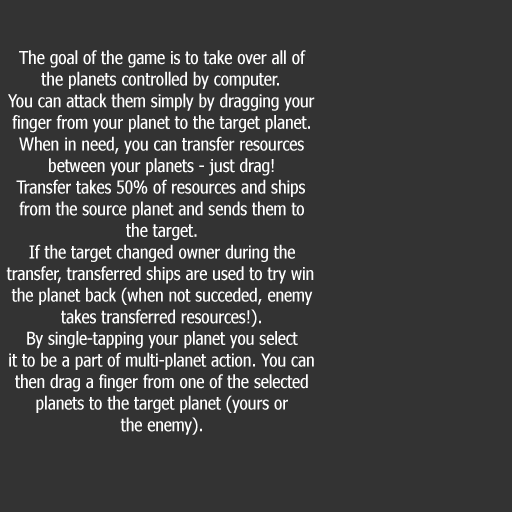
<style>
.page{position:relative;width:512px;height:512px;background:#333333}
.page>*{position:absolute;margin:0}
.t1{font:18px "Nina";color:#ffffff}
</style>
<div class="page">
<p class="t1" style="left:6px;top:50px;width:309px;height:385px;text-align:center">The goal of the game is to take over all of<br>the planets controlled by computer.<br>You can attack them simply by dragging your<br>finger from your planet to the target planet.<br>When in need, you can transfer resources<br>between your planets - just drag!<br>Transfer takes 50% of resources and ships<br>from the source planet and sends them to<br>the target.<br>If the target changed owner during the<br>transfer, transferred ships are used to try win<br>the planet back (when not succeded, enemy<br>takes transferred resources!).<br>By single-tapping your planet you select<br>it to be a part of multi-planet action. You can<br>then drag a finger from one of the selected<br>planets to the target planet (yours or<br>the enemy).</p>
</div>
